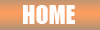
<style>
.page{position:relative;width:100px;height:30px}
.page>*{position:absolute;margin:0}
.t1{font:24px "Impact";color:#fefdfc}
</style>
<div class="page">
<p class="t1" style="left:23px;top:5px;width:52px;height:19px">HOME</p>
</div>
